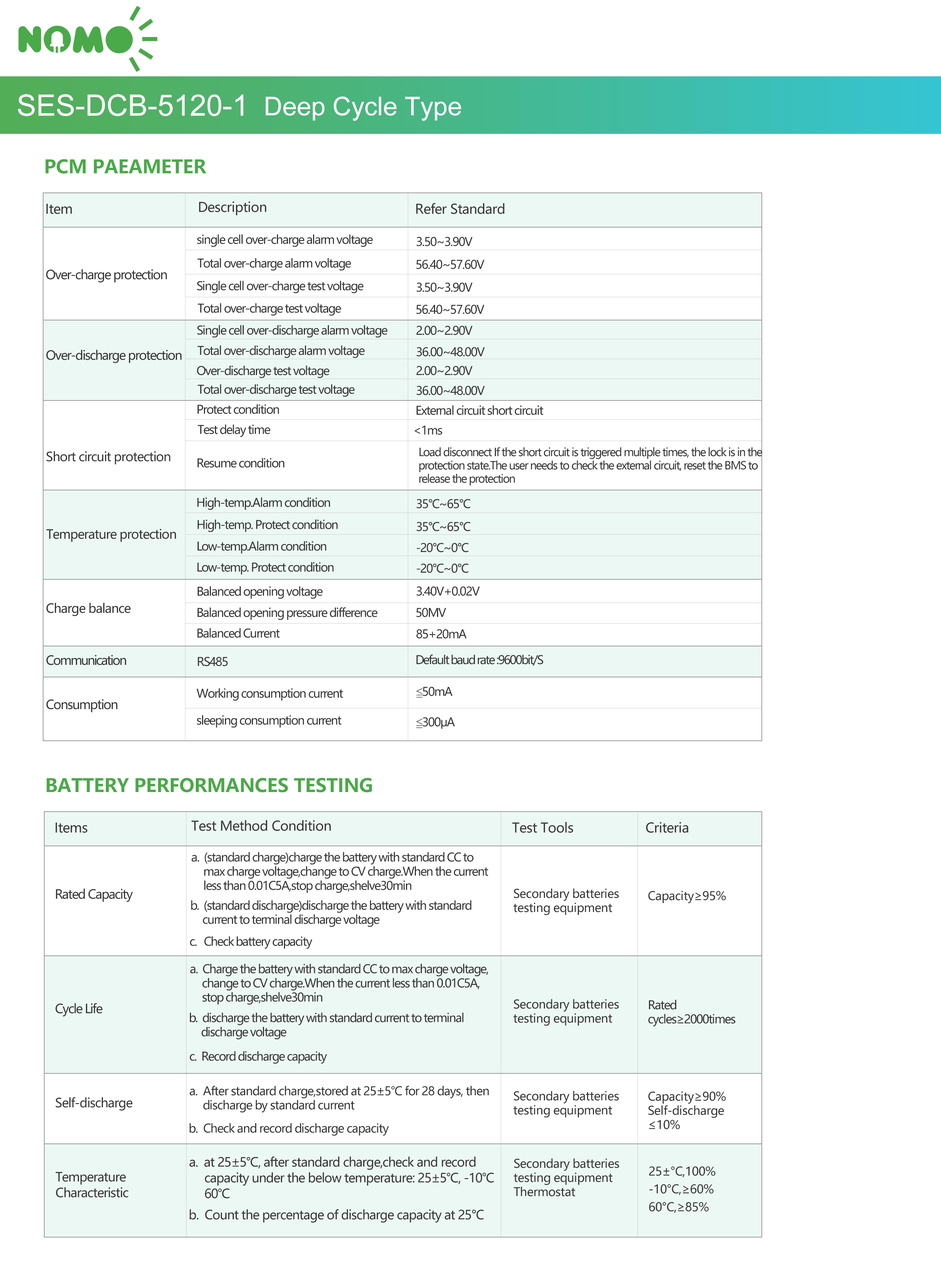
<style>
.page{position:relative;width:941px;height:1267px;background:#ffffff}
.page>*{position:absolute;margin:0}
.t1{font:29.5px "ArialMT";color:#ffffff}
.t2{font:25.8px "ArialMT";color:#ffffff}
.t3{font:18.4px "MicrosoftYaHeiUI-Bold";letter-spacing:-0.01em;color:#4aa948}
.t4{font:13.3px "MicrosoftYaHeiUI";letter-spacing:-0.025em;color:#343434}
.t5{font:11.8px "MicrosoftYaHeiUI";letter-spacing:-0.075em;color:#343434}
.t6{font:12.5px "MicrosoftYaHeiUI";letter-spacing:-0.075em;color:#343434}
.t7{font:11.1px "MicrosoftYaHeiUI";letter-spacing:-0.075em;color:#343434}
.t8{font:12.5px "MicrosoftYaHeiUI";letter-spacing:-0.05em;color:#343434}
.t9{font:12.5px "MicrosoftYaHeiUI";letter-spacing:-0.1em;color:#343434}
.t10{font:11.8px "MicrosoftYaHeiUI";letter-spacing:-0.1em;color:#343434}
.t11{font:11.8px "MicrosoftYaHeiUI";letter-spacing:-0.025em;color:#343434}
.t12{font:11.8px "MicrosoftYaHeiUI";letter-spacing:-0.05em;color:#343434}
</style>
<div class="page">
<p class="t1" style="left:18px;top:94px;width:225px;height:22px">SES-DCB-5120-1</p>
<p class="t2" style="left:266px;top:96px;width:195px;height:25px">Deep Cycle Type</p>
<p class="t3" style="left:45px;top:159px;width:162px;height:15px">PCM PAEAMETER</p>
<p class="t4" style="left:46px;top:204px;width:26px;height:10px">Item</p>
<p class="t4" style="left:199px;top:201px;width:67px;height:14px">Description</p>
<p class="t4" style="left:416px;top:203px;width:88px;height:11px">Refer Standard</p>
<p class="t5" style="left:197px;top:234px;width:176px;height:13px">single cell over-charge alarm voltage</p>
<p class="t5" style="left:417px;top:237px;width:56px;height:9px">3.50~3.90V</p>
<p class="t6" style="left:46px;top:269px;width:121px;height:13px">Over-charge protection</p>
<p class="t5" style="left:197px;top:258px;width:154px;height:13px">Total over-charge alarm voltage</p>
<p class="t5" style="left:416px;top:260px;width:69px;height:9px">56.40~57.60V</p>
<p class="t5" style="left:197px;top:281px;width:167px;height:13px">Single cell over-charge test voltage</p>
<p class="t5" style="left:417px;top:282px;width:56px;height:10px">3.50~3.90V</p>
<p class="t5" style="left:198px;top:303px;width:143px;height:13px">Total over-charge test voltage</p>
<p class="t5" style="left:416px;top:305px;width:69px;height:9px">56.40~57.60V</p>
<p class="t5" style="left:197px;top:325px;width:191px;height:13px">Single cell over-discharge alarm voltage</p>
<p class="t5" style="left:416px;top:326px;width:57px;height:9px">2.00~2.90V</p>
<p class="t6" style="left:46px;top:350px;width:136px;height:13px">Over-discharge protection</p>
<p class="t5" style="left:197px;top:346px;width:168px;height:12px">Total over-discharge alarm voltage</p>
<p class="t5" style="left:417px;top:347px;width:68px;height:10px">36.00~48.00V</p>
<p class="t5" style="left:197px;top:365px;width:132px;height:13px">Over-discharge test voltage</p>
<p class="t5" style="left:416px;top:366px;width:57px;height:9px">2.00~2.90V</p>
<p class="t5" style="left:198px;top:384px;width:157px;height:13px">Total over-discharge test voltage</p>
<p class="t5" style="left:417px;top:386px;width:68px;height:9px">36.00~48.00V</p>
<p class="t5" style="left:197px;top:404px;width:82px;height:10px">Protect condition</p>
<p class="t5" style="left:416px;top:405px;width:128px;height:10px">External circuit short circuit</p>
<p class="t5" style="left:198px;top:424px;width:72px;height:13px">Test delay time</p>
<p class="t5" style="left:414px;top:425px;width:29px;height:10px">&lt;1ms</p>
<p class="t7" style="left:419px;top:447px;width:343px;height:39px">Load disconnect If the short circuit is triggered multiple times, the lock is in the<br>protection state.The user needs to check the external circuit, reset the BMS to <br>release the protection</p>
<p class="t8" style="left:46px;top:451px;width:124px;height:14px">Short circuit protection</p>
<p class="t5" style="left:197px;top:458px;width:87px;height:10px">Resume condition</p>
<p class="t5" style="left:197px;top:497px;width:133px;height:13px">High-temp.Alarm condition</p>
<p class="t5" style="left:417px;top:499px;width:54px;height:10px">35°C~65°C</p>
<p class="t5" style="left:198px;top:520px;width:140px;height:12px">High-temp. Protect condition</p>
<p class="t5" style="left:417px;top:522px;width:54px;height:9px">35°C~65°C</p>
<p class="t8" style="left:46px;top:529px;width:130px;height:13px">Temperature protection</p>
<p class="t5" style="left:197px;top:541px;width:129px;height:13px">Low-temp.Alarm condition</p>
<p class="t5" style="left:417px;top:543px;width:52px;height:9px">-20°C~0°C</p>
<p class="t5" style="left:197px;top:562px;width:137px;height:13px">Low-temp. Protect condition</p>
<p class="t5" style="left:417px;top:563px;width:52px;height:10px">-20°C~0°C</p>
<p class="t5" style="left:198px;top:586px;width:125px;height:13px">Balanced opening voltage</p>
<p class="t5" style="left:417px;top:586px;width:63px;height:10px">3.40V+0.02V</p>
<p class="t8" style="left:46px;top:603px;width:85px;height:13px">Charge balance</p>
<p class="t5" style="left:197px;top:607px;width:181px;height:13px">Balanced opening pressure difference</p>
<p class="t5" style="left:416px;top:608px;width:30px;height:9px">50MV</p>
<p class="t5" style="left:197px;top:628px;width:83px;height:10px">Balanced Current</p>
<p class="t5" style="left:416px;top:629px;width:51px;height:10px">85+20mA</p>
<p class="t9" style="left:46px;top:655px;width:80px;height:10px">Communication</p>
<p class="t5" style="left:198px;top:657px;width:30px;height:9px">RS485</p>
<p class="t10" style="left:416px;top:655px;width:127px;height:11px">Default baud rate :9600bit/S</p>
<p class="t5" style="left:197px;top:688px;width:146px;height:13px">Working consumption current</p>
<p class="t5" style="left:416px;top:687px;width:36px;height:11px">≦50mA</p>
<p class="t6" style="left:46px;top:699px;width:72px;height:13px">Consumption</p>
<p class="t5" style="left:197px;top:715px;width:144px;height:13px">sleeping consumption current</p>
<p class="t5" style="left:416px;top:717px;width:39px;height:12px">≦300μA</p>
<p class="t3" style="left:46px;top:778px;width:326px;height:14px">BATTERY PERFORMANCES TESTING</p>
<p class="t4" style="left:191px;top:820px;width:140px;height:11px">Test Method Condition</p>
<p class="t4" style="left:512px;top:822px;width:61px;height:11px">Test Tools</p>
<p class="t4" style="left:646px;top:822px;width:42px;height:11px">Criteria</p>
<p class="t4" style="left:56px;top:822px;width:31px;height:11px">Items</p>
<p class="t5" style="left:191px;top:852px;width:297px;height:41px">a.  (standard charge)charge the battery with standard CC to <br>     max charge voltage,change to CV charge.When the current <br>     less than 0.01C5A,stop charge,shelve30min</p>
<p class="t6" style="left:56px;top:889px;width:77px;height:13px">Rated Capacity</p>
<p class="t11" style="left:513px;top:888px;width:106px;height:27px">Secondary batteries<br>testing equipment</p>
<p class="t11" style="left:648px;top:891px;width:78px;height:12px">Capacity≥95%</p>
<p class="t5" style="left:191px;top:900px;width:281px;height:27px">b.  (standard discharge)discharge the battery with standard <br>     current to terminal discharge voltage</p>
<p class="t5" style="left:190px;top:936px;width:122px;height:13px">c.   Check battery capacity</p>
<p class="t5" style="left:190px;top:964px;width:298px;height:41px">a.  Charge the battery with standard CC to max charge voltage,<br>     change to CV charge.When the current less than 0.01C5A,<br>     stop charge,shelve30min</p>
<p class="t11" style="left:513px;top:999px;width:106px;height:27px">Secondary batteries<br>testing equipment</p>
<p class="t5" style="left:648px;top:1000px;width:88px;height:27px">Rated<br>cycles≥2000times</p>
<p class="t6" style="left:55px;top:1003px;width:48px;height:14px">Cycle Life</p>
<p class="t5" style="left:190px;top:1013px;width:274px;height:27px">b.  discharge the battery with standard current to terminal <br>     discharge voltage</p>
<p class="t5" style="left:190px;top:1051px;width:137px;height:13px">c.  Record discharge capacity</p>
<p class="t12" style="left:190px;top:1086px;width:299px;height:27px">a.  After standard charge,stored at 25±5℃ for 28 days, then <br>     discharge by standard current</p>
<p class="t8" style="left:56px;top:1097px;width:76px;height:14px">Self-discharge</p>
<p class="t11" style="left:513px;top:1091px;width:106px;height:27px">Secondary batteries<br>testing equipment</p>
<p class="t11" style="left:648px;top:1091px;width:78px;height:39px">Capacity≥90%<br>Self-discharge <br>≤10%</p>
<p class="t12" style="left:190px;top:1123px;width:199px;height:13px">b.  Check and record discharge capacity</p>
<p class="t8" style="left:190px;top:1156px;width:304px;height:42px">a.  at 25±5℃, after standard charge,check and record <br>     capacity under the below temperature: 25±5℃, -10℃<br>     60℃</p>
<p class="t11" style="left:514px;top:1158px;width:105px;height:39px">Secondary batteries<br>testing equipment<br>Thermostat</p>
<p class="t11" style="left:649px;top:1166px;width:66px;height:47px">25±°C,100%<br>-10°C,≥60%<br>60°C,≥85%</p>
<p class="t8" style="left:56px;top:1172px;width:72px;height:26px">Temperature<br>Characteristic</p>
<p class="t8" style="left:190px;top:1209px;width:294px;height:14px">b.  Count the percentage of discharge capacity at 25°C</p>
</div>
